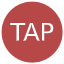
<style>
.page{position:relative;width:64px;height:64px;background:#b74848}
.page>*{position:absolute;margin:0}
.t1{font:24px "DejaVuSans";color:#ffffff}
</style>
<div class="page">
<p class="t1" style="left:10px;top:23px;width:44px;height:18px">TAP</p>
</div>
